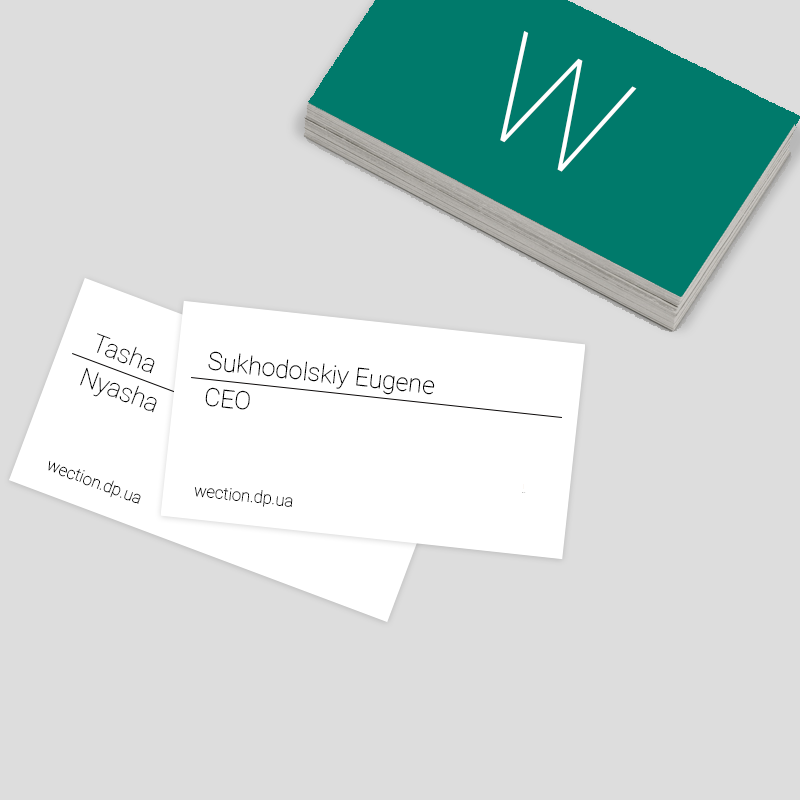
<style>
.page{position:relative;width:800px;height:800px;background:#dddddd}
.page>*{position:absolute;margin:0}
.t1{font:151.8px "Roboto-Thin";color:#ffffff}
.t2{font:25px "Roboto-Thin";color:#000000}
.t3{font:16.7px "Roboto-Thin";color:#000000}
</style>
<div class="page">
<p class="t1" style="left:500px;top:31px;width:137px;height:141px;rotate:27deg">W</p>
<p class="t2" style="left:97px;top:333px;width:58px;height:41px;rotate:21deg">Tasha</p>
<p class="t2" style="left:208px;top:351px;width:227px;height:44px;rotate:6deg">Sukhodolskiy Eugene</p>
<p class="t2" style="left:80px;top:367px;width:77px;height:46px;rotate:21deg">Nyasha</p>
<p class="t2" style="left:205px;top:387px;width:45px;height:23px;rotate:6deg">CEO</p>
<p class="t3" style="left:48px;top:460px;width:93px;height:44px;rotate:21deg">wection.dp.ua</p>
<p class="t3" style="left:194px;top:487px;width:99px;height:20px;rotate:6deg">wection.dp.ua</p>
</div>
